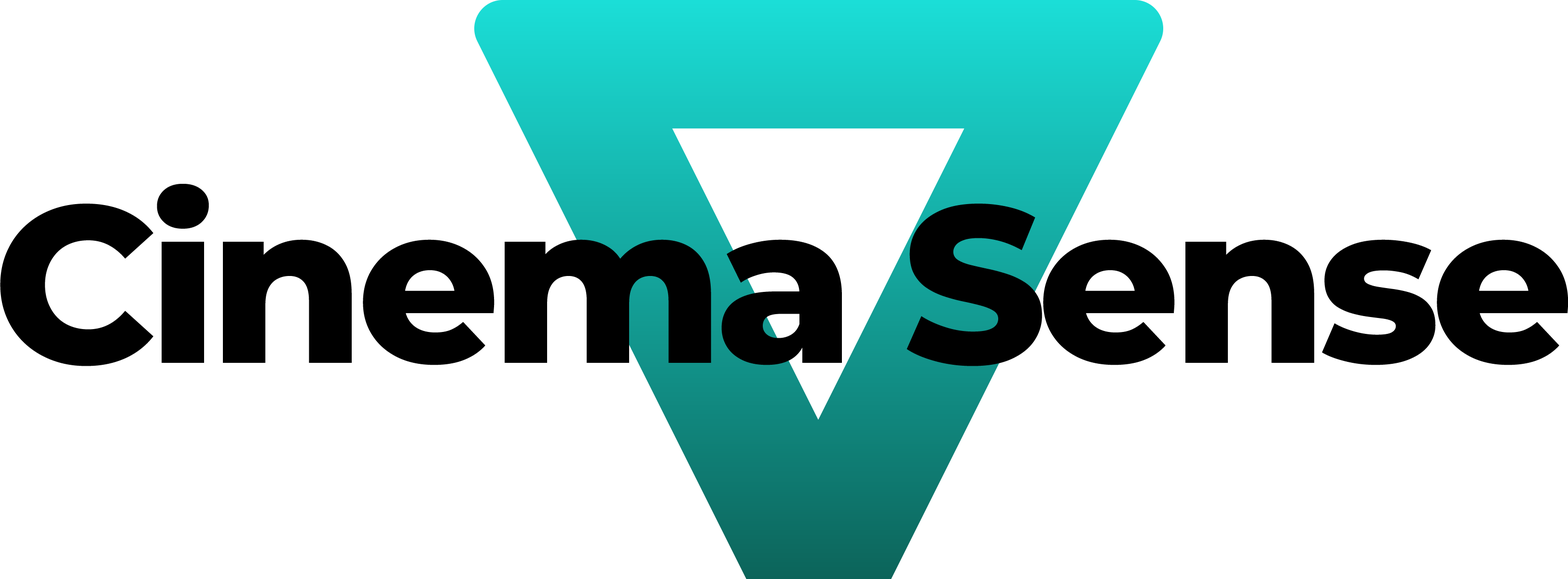
<style>
.page{position:relative;width:1568px;height:579px;background:#ffffff}
.page>*{position:absolute;margin:0}
.t1{font:222.9px "MontserratRoman-ExtraBold";letter-spacing:-0.04em;color:#000000}
</style>
<div class="page">
<p class="t1" style="left:0px;top:184px;width:1568px;height:182px">Cinema Sense</p>
</div>
